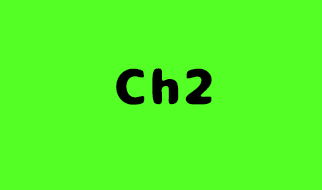
<style>
.page{position:relative;width:322px;height:190px;background:#53ff25}
.page>*{position:absolute;margin:0}
.t1{font:50px "07NikumaruFont";letter-spacing:0.08em;color:#000000}
</style>
<div class="page">
<p class="t1" style="left:116px;top:68px;width:96px;height:37px">Ch2</p>
</div>
